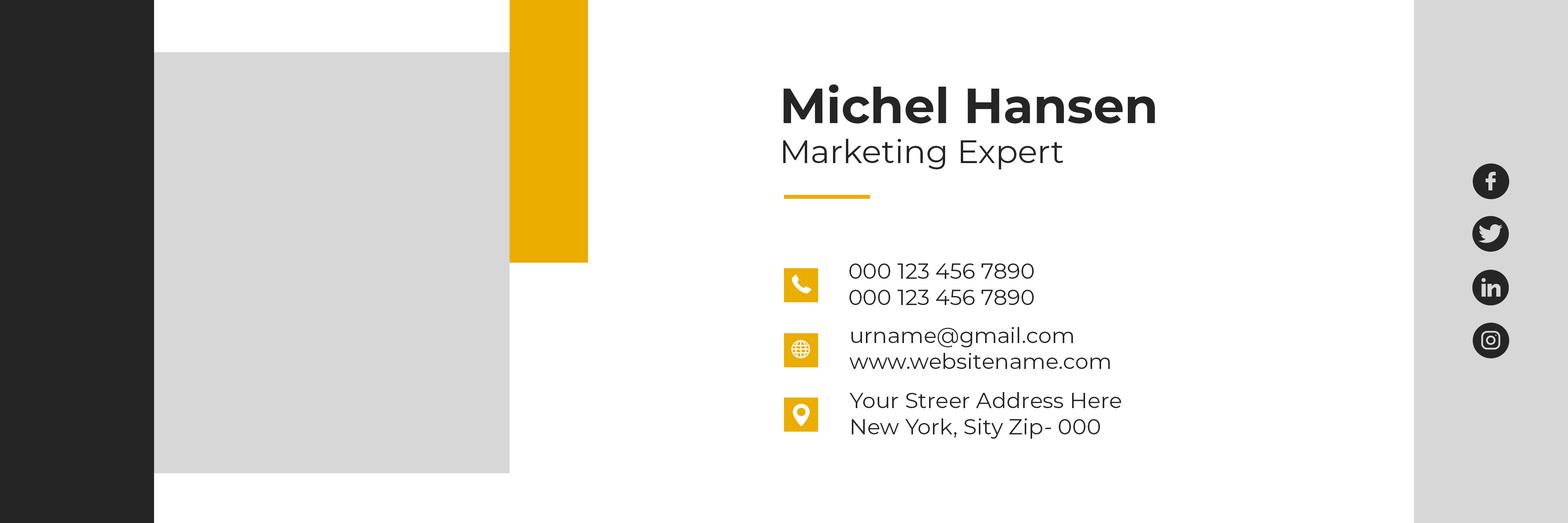
<style>
.page{position:relative;width:1568px;height:523px;background:#ffffff}
.page>*{position:absolute;margin:0}
.t1{font:49px "Montserrat-Bold";color:#252525}
.t2{font:32.7px "Montserrat-Regular";color:#252525}
.t3{font:21.8px "Montserrat-Regular";color:#252525}
</style>
<div class="page">
<p class="t1" style="left:784px;top:84px;width:371px;height:40px">Michel Hansen</p>
<p class="t2" style="left:783px;top:139px;width:280px;height:30px">Marketing Expert</p>
<p class="t3" style="left:849px;top:263px;width:185px;height:42px">000 123 456 7890<br>000 123 456 7890</p>
<p class="t3" style="left:849px;top:327px;width:261px;height:42px">urname@gmail.com<br>www.websitename.com</p>
<p class="t3" style="left:849px;top:392px;width:272px;height:47px">Your Streer Address Here<br>New York, Sity Zip- 000</p>
</div>
